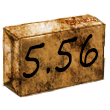
<style>
.page{position:relative;width:110px;height:110px;background:#ffffff}
.page>*{position:absolute;margin:0}
.t1{font:50px "SegoeScript";letter-spacing:0.025em;color:#010101;scale:0.64 1}
</style>
<div class="page">
<p class="t1" style="left:22px;top:34px;width:76px;height:45px;rotate:-10deg">5.56</p>
</div>
